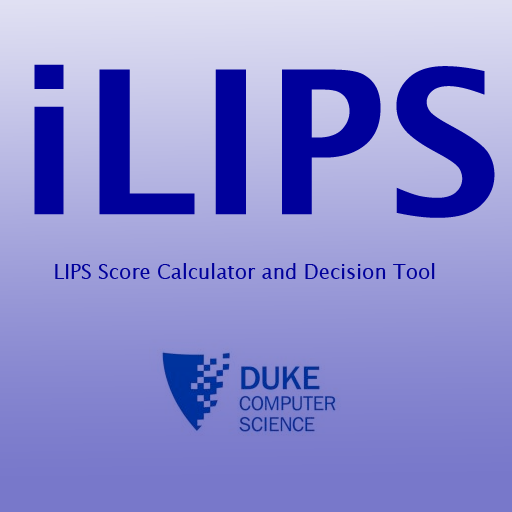
<style>
.page{position:relative;width:512px;height:512px}
.page>*{position:absolute;margin:0}
.t1{font:200px "LucidaSans-Demi";color:#00009c}
.t2{font:20px "LucidaSans";color:#00009c}
</style>
<div class="page">
<p class="t1" style="left:34px;top:64px;width:461px;height:154px">iLIPS</p>
<p class="t2" style="left:55px;top:263px;width:380px;height:16px">LIPS Score Calculator and Decision Tool</p>
</div>
